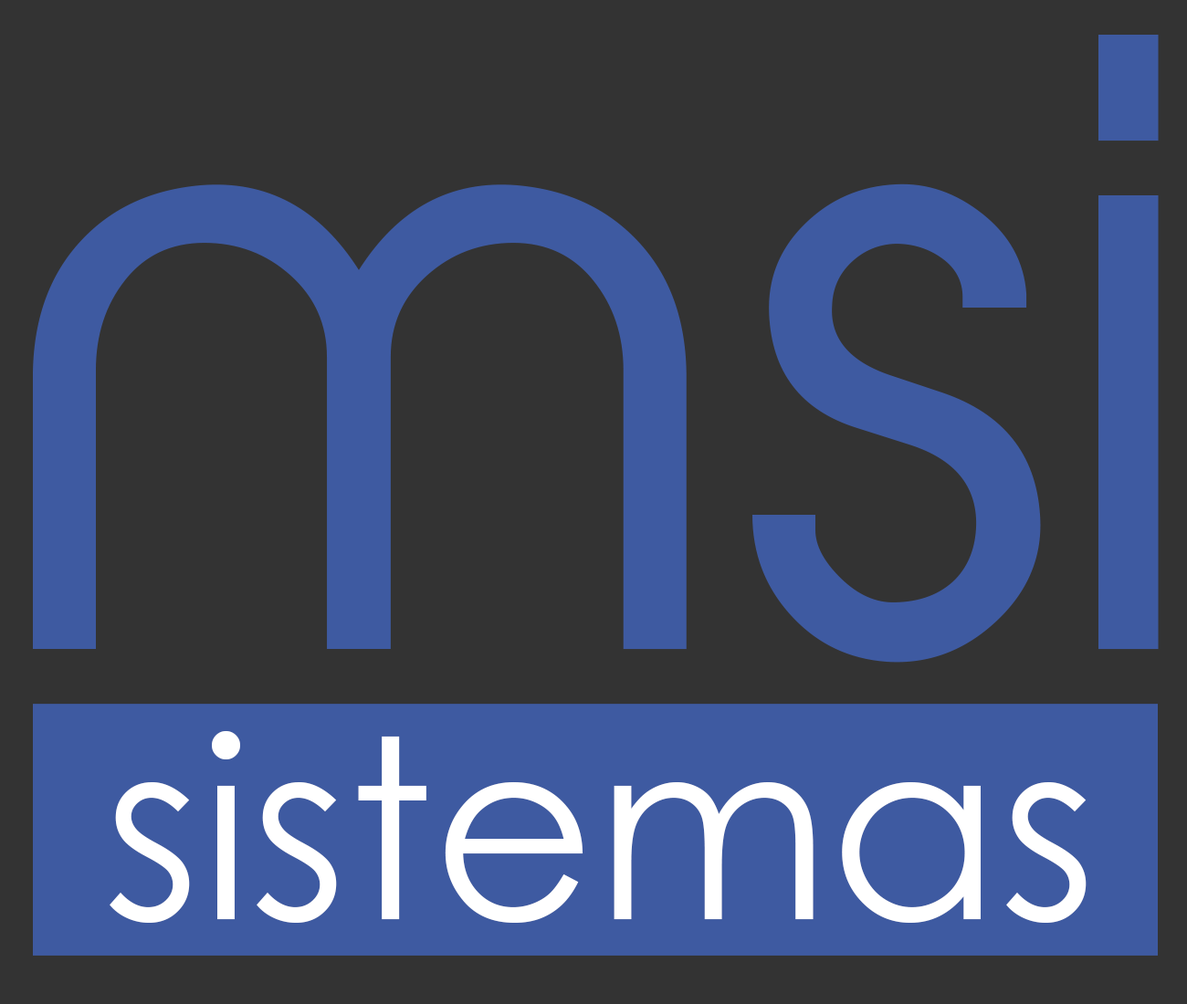
<style>
.page{position:relative;width:1187px;height:1004px;background:#333333}
.page>*{position:absolute;margin:0}
.t1{font:797px "AbeatbyKai";color:#3e5aa1}
.t2{font:250px "CenturyGothic";color:#ffffff}
</style>
<div class="page">
<p class="t1" style="left:33px;top:35px;width:1126px;height:628px">msi</p>
<p class="t2" style="left:110px;top:731px;width:977px;height:192px">sistemas</p>
</div>
